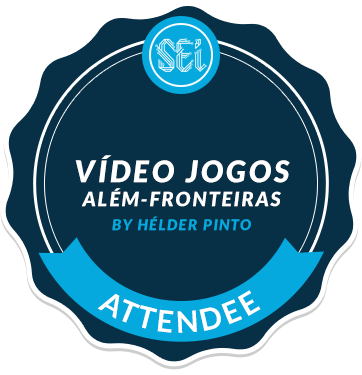
<style>
.page{position:relative;width:362px;height:375px;background:#073046}
.page>*{position:absolute;margin:0}
.t1{font:20px/24px "Lato-BlackItalic";letter-spacing:0.1em;color:#ffffff}
.t2{font:35px/24px "Lato-BlackItalic";letter-spacing:0.1em;color:#ffffff}
.t3{font:30px/24px "Lato-BlackItalic";letter-spacing:0.1em;color:#ffffff}
.t4{font:15px/24px "Lato-BlackItalic";letter-spacing:0.1em;color:#05a9dd}
.t5{font:29.7px "Lato-Bold";letter-spacing:0.1em;color:#ffffff}
</style>
<div class="page">
<p class="t1" style="left:75px;top:155px;width:215px;height:76px;text-align:center"><span class="t2"><br></span><span class="t3">VÍDEO JOGOS <br></span>ALÉM-FRONTEIRAS<br><span class="t4">BY HÉLDER PINTO</span></p>
<p class="t5" style="left:97px;top:290px;width:164px;height:43px">ATTENDEE</p>
</div>
